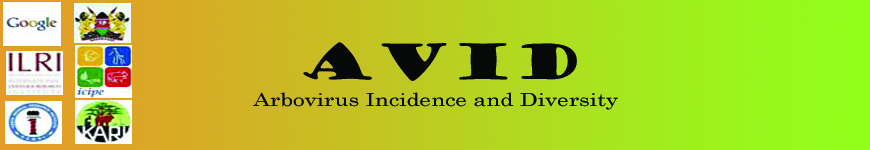
<style>
.page{position:relative;width:870px;height:150px}
.page>*{position:absolute;margin:0}
.t1{font:48px "GoudyStout";color:#070909;scale:1.28 1}
.t2{font:18px "CenturySchoolbook";color:#070909;scale:1.28 1}
</style>
<div class="page">
<p class="t1" style="left:303px;top:42px;width:274px;height:39px">AVID</p>
<p class="t2" style="left:253px;top:92px;width:365px;height:18px">Arbovirus Incidence and Diversity</p>
</div>
